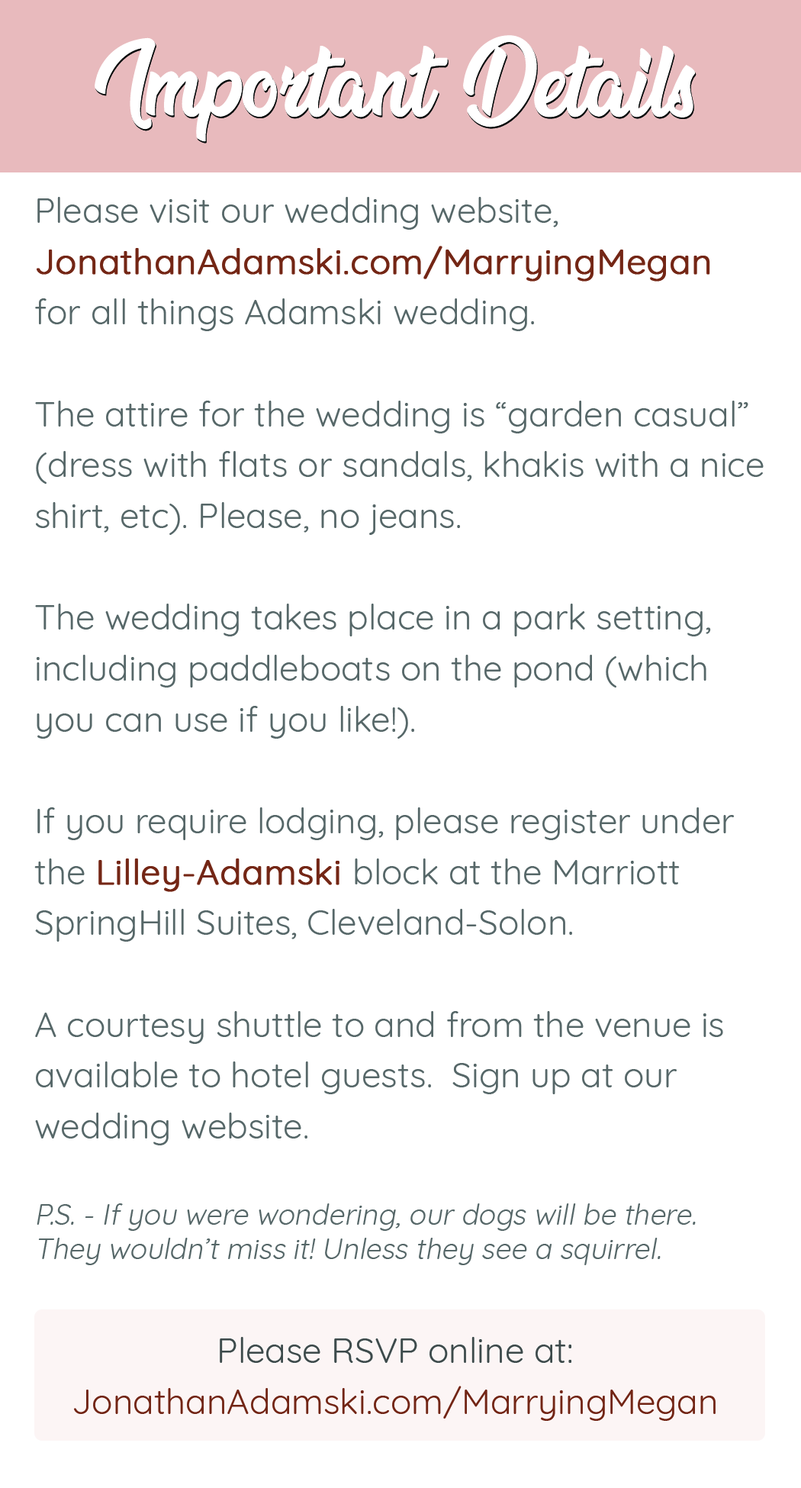
<style>
.page{position:relative;width:801px;height:1488px;background:#ffffff}
.page>*{position:absolute;margin:0}
.t1{font:76.3px "NatureBeautyPersonalUse";color:#ffffff}
.t2{font:35px/50.9px "Quicksand-Regular";color:#566768}
.t3{font:35px/50.9px "Quicksand-Regular";color:#732615;font-weight:bold}
.t4{font:28.6px/35px "Quicksand-Regular";color:#566768;font-style:italic}
.t5{font:35px/50.9px "Quicksand-Regular";color:#712515}
.t6{font:35px/50.9px "Quicksand-Regular";color:#3d4a4b}
</style>
<div class="page">
<p class="t1" style="left:95px;top:35px;width:601px;height:107px">Important  Details</p>
<p class="t2" style="left:34px;top:197px;width:730px;height:1068px">Please visit our wedding website, <span class="t3">JonathanAdamski.com/MarryingMegan </span>for all things Adamski wedding.<br><br>The attire for the wedding is “garden casual” (dress with flats or sandals, khakis with a nice shirt, etc). Please, no jeans.<br><br>The wedding takes place in a park setting, including paddleboats on the pond (which you can use if you like!).<br><br>If you require lodging, please register under the <span class="t3">Lilley-Adamski </span>block at the Marriott SpringHill Suites, Cleveland-Solon.<br><br>A courtesy shuttle to and from the venue is available to hotel guests.  Sign up at our wedding website.<br><br><span class="t4">P.S. - If you were wondering, our dogs will be there. They wouldn’t miss it! Unless they see a squirrel.</span></p>
<p class="t5" style="left:74px;top:1337px;width:642px;height:84px;text-align:center"><span class="t6">Please RSVP online at:<br></span>JonathanAdamski.com/MarryingMegan</p>
</div>
